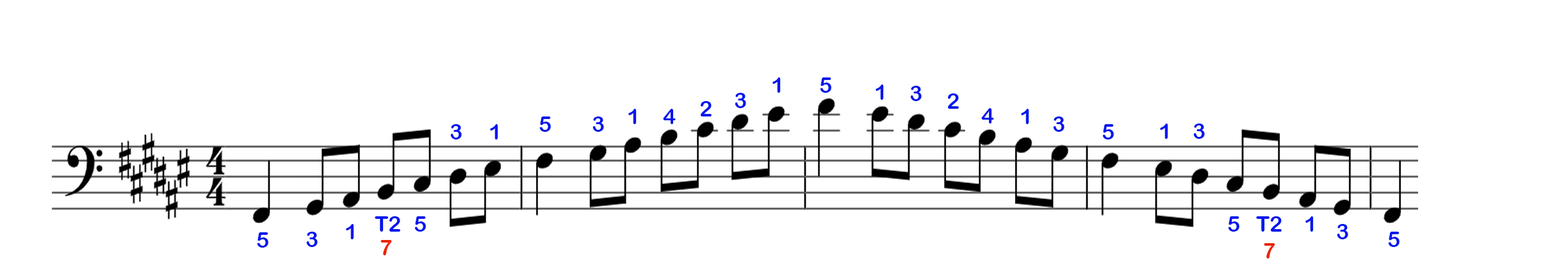
<style>
.page{position:relative;width:1568px;height:279px;background:#ffffff}
.page>*{position:absolute;margin:0}
.t1{font:21.8px "ArialRoundedMTBold";color:#0417ec}
.t2{font:21.8px "ArialRoundedMTBold";color:#ec2404}
</style>
<div class="page">
<p class="t1" style="left:772px;top:78px;width:9px;height:15px">1</p>
<p class="t1" style="left:820px;top:78px;width:11px;height:15px">5</p>
<p class="t1" style="left:876px;top:85px;width:8px;height:15px">1</p>
<p class="t1" style="left:910px;top:86px;width:12px;height:15px">3</p>
<p class="t1" style="left:700px;top:101px;width:12px;height:16px">2</p>
<p class="t1" style="left:735px;top:93px;width:11px;height:15px">3</p>
<p class="t1" style="left:947px;top:94px;width:12px;height:15px">2</p>
<p class="t1" style="left:628px;top:109px;width:9px;height:15px">1</p>
<p class="t1" style="left:663px;top:109px;width:13px;height:15px">4</p>
<p class="t1" style="left:981px;top:108px;width:13px;height:16px">4</p>
<p class="t1" style="left:1021px;top:109px;width:8px;height:15px">1</p>
<p class="t1" style="left:450px;top:124px;width:12px;height:16px">3</p>
<p class="t1" style="left:490px;top:124px;width:8px;height:16px">1</p>
<p class="t1" style="left:539px;top:117px;width:12px;height:15px">5</p>
<p class="t1" style="left:592px;top:117px;width:12px;height:15px">3</p>
<p class="t1" style="left:1053px;top:117px;width:12px;height:15px">3</p>
<p class="t1" style="left:1102px;top:124px;width:12px;height:16px">5</p>
<p class="t1" style="left:1160px;top:124px;width:8px;height:15px">1</p>
<p class="t1" style="left:1193px;top:124px;width:12px;height:15px">3</p>
<p class="t1" style="left:375px;top:216px;width:25px;height:16px">T2</p>
<p class="t1" style="left:414px;top:216px;width:12px;height:16px">5</p>
<p class="t1" style="left:1228px;top:216px;width:11px;height:16px">5</p>
<p class="t1" style="left:1256px;top:216px;width:26px;height:16px">T2</p>
<p class="t1" style="left:1305px;top:216px;width:9px;height:16px">1</p>
<p class="t1" style="left:257px;top:233px;width:11px;height:15px">5</p>
<p class="t1" style="left:306px;top:232px;width:12px;height:15px">3</p>
<p class="t1" style="left:346px;top:224px;width:8px;height:16px">1</p>
<p class="t1" style="left:1337px;top:224px;width:11px;height:16px">3</p>
<p class="t1" style="left:1388px;top:232px;width:12px;height:15px">5</p>
<p class="t2" style="left:380px;top:240px;width:12px;height:16px">7</p>
<p class="t2" style="left:1264px;top:243px;width:11px;height:16px">7</p>
</div>
